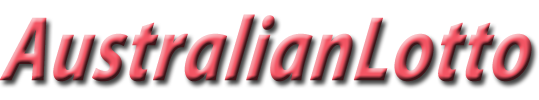
<style>
.page{position:relative;width:539px;height:100px;background:#ffffff}
.page>*{position:absolute;margin:0}
.t1{font:92px "MyriadPro-BoldIt";font-weight:bold;font-style:italic;scale:0.79 1}
</style>
<div class="page">
<p class="t1" style="left:0px;top:14px;width:532px;height:68px">AustralianLotto</p>
</div>
